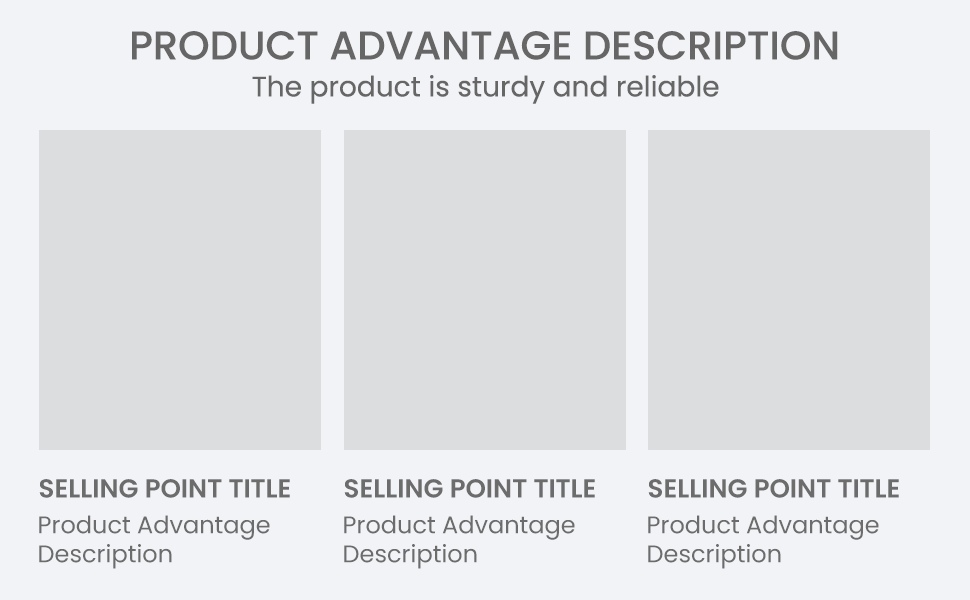
<style>
.page{position:relative;width:970px;height:600px;background:#f2f3f6}
.page>*{position:absolute;margin:0}
.t1{font:40px "Poppins-Medium";color:#666666;text-transform:uppercase}
.t2{font:28px "Poppins-Regular";color:#666666}
.t3{font:26px "Poppins-SemiBold";color:#6c6c6c;text-transform:uppercase}
.t4{font:24px "Poppins-Regular";color:#6c6c6c}
</style>
<div class="page">
<p class="t1" style="left:132px;top:31px;width:706px;height:29px">Product Advantage Description</p>
<p class="t2" style="left:252px;top:75px;width:467px;height:29px">The product is sturdy and reliable</p>
<p class="t3" style="left:39px;top:479px;width:251px;height:19px">Selling point title</p>
<p class="t3" style="left:344px;top:479px;width:251px;height:19px">Selling point title</p>
<p class="t3" style="left:648px;top:479px;width:251px;height:19px">Selling point title</p>
<p class="t4" style="left:39px;top:515px;width:231px;height:54px">Product Advantage<br>Description</p>
<p class="t4" style="left:344px;top:515px;width:231px;height:54px">Product Advantage<br>Description</p>
<p class="t4" style="left:648px;top:515px;width:231px;height:54px">Product Advantage<br>Description</p>
</div>
